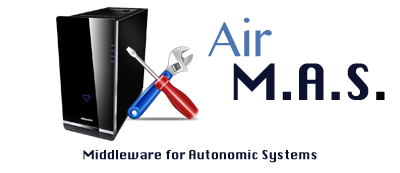
<style>
.page{position:relative;width:400px;height:173px;background:#ffffff}
.page>*{position:absolute;margin:0}
.t1{font:48.8px "MyanmarMN";color:#4d75b0}
.t2{font:48.8px "Silom";color:#0d1230}
.t3{font:48.8px "Silom";color:#000000}
.t4{font:12.2px "Silom";color:#0d1230}
</style>
<div class="page">
<p class="t1" style="left:207px;top:17px;width:65px;height:40px">Air</p>
<p class="t2" style="left:233px;top:63px;width:152px;height:37px">M.A.S<span class="t3">.</span></p>
<p class="t4" style="left:83px;top:150px;width:234px;height:13px">Middleware for Autonomic Systems</p>
</div>
